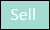
<style>
.page{position:relative;width:50px;height:30px;background:#a3dcd3}
.page>*{position:absolute;margin:0}
.t1{font:18px "Calibri";color:#ffffff}
</style>
<div class="page">
<p class="t1" style="left:11px;top:8px;width:24px;height:12px">Sell</p>
</div>
